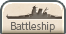
<style>
.page{position:relative;width:66px;height:34px}
.page>*{position:absolute;margin:0}
.t1{font:10px "UDShinGoPro-Light";color:#6a6560;scale:0.9 1}
</style>
<div class="page">
<p class="t1" style="left:11px;top:21px;width:44px;height:12px">Battleship</p>
</div>
